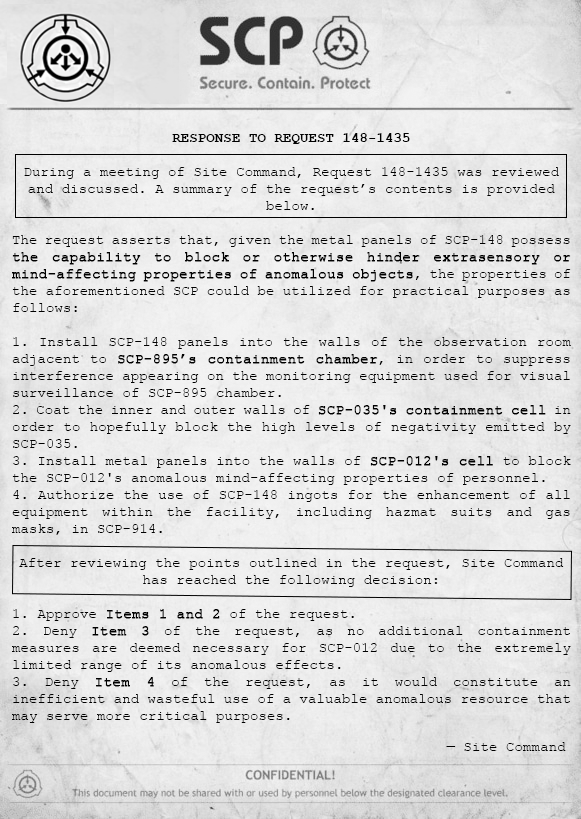
<style>
.page{position:relative;width:581px;height:819px}
.page>*{position:absolute;margin:0}
.t1{font:14.2px "CourierNewPSMT";color:#000000}
.t2{font:14.2px "CourierNewPS-BoldMT";color:#000000;text-transform:uppercase}
.t3{font:14.2px "CourierNewPSMT";color:#000000;font-weight:bold}
</style>
<div class="page">
<p class="t1" style="left:12px;top:133px;width:559px;height:590px;text-align:center"><span class="t2">Response to Request 148-1435<br></span><br>During a meeting of Site Command, Request 148-1435 was reviewed and discussed. A summary of the request’s contents is provided below.<br><br>The request asserts that, given the metal panels of SCP-148 possess <span class="t3">the capability to block or otherwise hinder extrasensory or mind-affecting properties of anomalous objects</span>, the properties of the aforementioned SCP could be utilized for practical purposes as follows:<br><br>1. Install SCP-148 panels into the walls of the observation room adjacent to <span class="t3">SCP-895’s containment chamber</span>, in order to suppress interference appearing on the monitoring equipment used for visual surveillance of SCP-895 chamber.<br>2. Coat the inner and outer walls of <span class="t3">SCP-035's containment cell</span> in order to hopefully block the high levels of negativity emitted by SCP-035.<br>3. Install metal panels into the walls of <span class="t3">SCP-012's cell</span> to block the SCP-012's anomalous mind-affecting properties of personnel.<br>4. Authorize the use of SCP-148 ingots for the enhancement of all equipment within the facility, including hazmat suits and gas masks, in SCP-914.<br><br>After reviewing the points outlined in the request, Site Command has reached the following decision:<br><br>1. Approve <span class="t3">Items 1 and 2</span> of the request.<br>2. Deny <span class="t3">Item 3</span> of the request, as no additional containment measures are deemed necessary for SCP-012 due to the extremely limited range of its anomalous effects.<br>3. Deny <span class="t3">Item 4</span> of the request, as it would constitute an inefficient and wasteful use of a valuable anomalous resource that may serve more critical purposes.</p>
<p class="t1" style="left:446px;top:742px;width:120px;height:9px">— Site Command</p>
</div>
